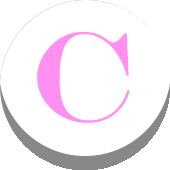
<style>
.page{position:relative;width:170px;height:170px;background:#ffffff}
.page>*{position:absolute;margin:0}
.t1{font:128px "EngraversMT";color:#ff8ff1}
</style>
<div class="page">
<p class="t1" style="left:37px;top:32px;width:93px;height:91px">C</p>
</div>
